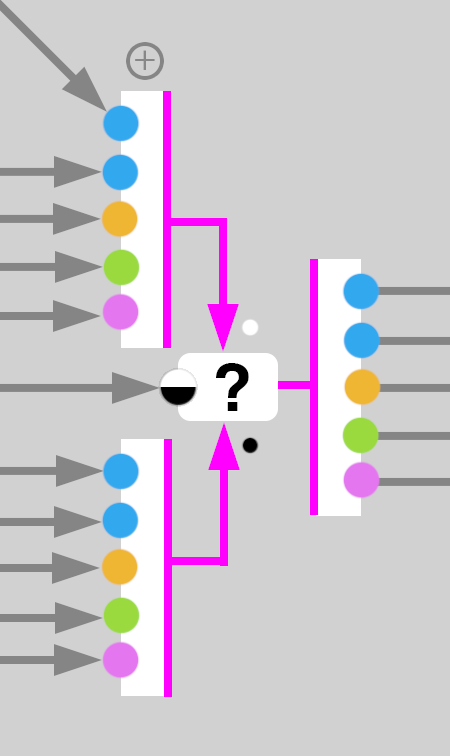
<style>
.page{position:relative;width:450px;height:756px;background:#d1d1d1}
.page>*{position:absolute;margin:0}
.t1{font:39.3px "Helvetica-Light";color:#878787}
.t2{font:66px "Helvetica-Bold";color:#000000}
</style>
<div class="page">
<p class="t1" style="left:135px;top:50px;width:20px;height:20px">+</p>
<p class="t2" style="left:216px;top:363px;width:33px;height:48px">?</p>
</div>
